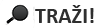
<style>
.page{position:relative;width:100px;height:28px;background:#ffffff}
.page>*{position:absolute;margin:0}
.t1{font:22px "Calibri-Bold";color:#2f2f2f}
</style>
<div class="page">
<p class="t1" style="left:35px;top:5px;width:59px;height:18px">TRAŽI!</p>
</div>
